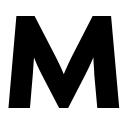
<style>
.page{position:relative;width:128px;height:128px;background:#ffffff}
.page>*{position:absolute;margin:0}
.t1{font:144px "Agenda-Bold";color:#000000}
</style>
<div class="page">
<p class="t1" style="left:8px;top:16px;width:112px;height:92px">M</p>
</div>
